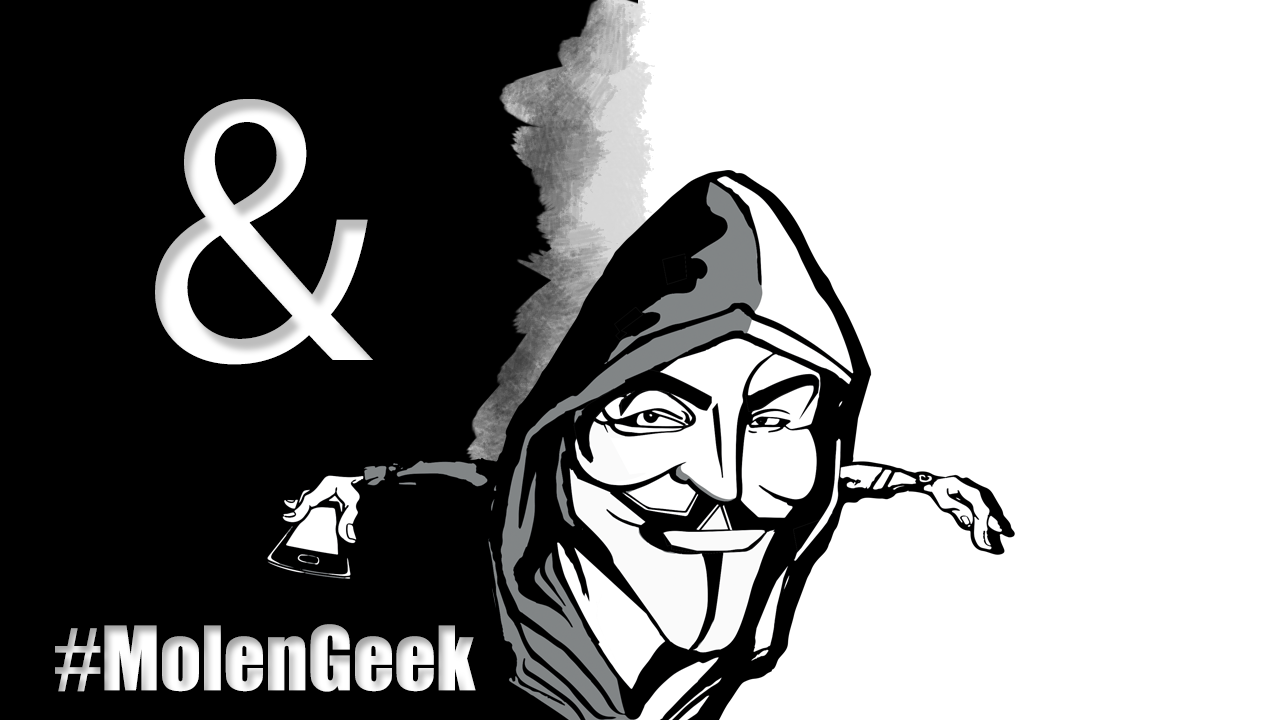
<style>
.page{position:relative;width:1280px;height:720px;background:#ffffff}
.page>*{position:absolute;margin:0}
.t1{font:381px "MyriadPro-Regular";color:#ffffff}
.t2{font:7.7px "Impact"}
.t3{font:84.7px "ArialMT"}
</style>
<div class="page">
<p class="t1" style="left:155px;top:99px;width:218px;height:266px">&amp;</p>
<p class="t2" style="left:55px;top:624px;width:421px;height:68px"><span class="t3">#</span>MolenGeek</p>
</div>
